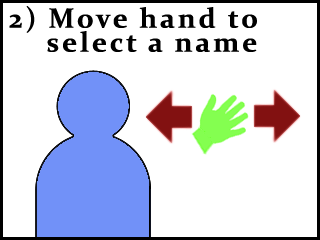
<style>
.page{position:relative;width:320px;height:240px;background:#ffffff}
.page>*{position:absolute;margin:0}
.t1{font:28px/24px "Constantia-Bold";letter-spacing:0.1em;color:#000000}
.t2{font:28px/18px "Constantia-Bold";letter-spacing:0.1em;color:#000000}
</style>
<div class="page">
<p class="t1" style="left:9px;top:6px;width:248px;height:46px"><span class="t2">2) </span>Move hand to<br>    select a name</p>
</div>
